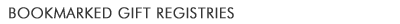
<style>
.page{position:relative;width:400px;height:24px;background:#ffffff}
.page>*{position:absolute;margin:0}
.t1{font:14.7px "FuturaBT-Light";letter-spacing:0.025em;color:#363636;text-transform:uppercase;font-weight:bold}
</style>
<div class="page">
<p class="t1" style="left:9px;top:7px;width:225px;height:12px">bookmarked gift registries</p>
</div>
